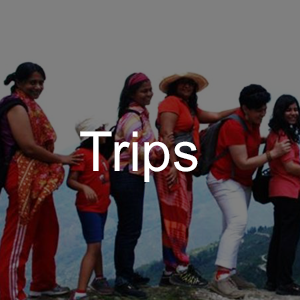
<style>
.page{position:relative;width:300px;height:300px;background:#7f7f7f}
.page>*{position:absolute;margin:0}
.t1{font:55px "ArialMT";color:#ffffff}
</style>
<div class="page">
<p class="t1" style="left:80px;top:131px;width:118px;height:51px">Trips</p>
</div>
